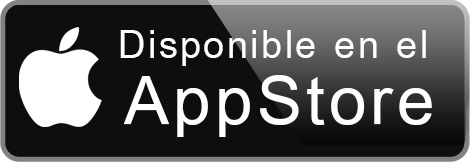
<style>
.page{position:relative;width:470px;height:162px;background:#0e0e0e}
.page>*{position:absolute;margin:0}
.t1{font:58px "CordiaNew-Bold";letter-spacing:0.04em;color:#fffefe}
.t2{font:103px "CordiaNew-Bold";letter-spacing:0.04em;color:#fffefe}
</style>
<div class="page">
<p class="t1" style="left:120px;top:30px;width:306px;height:36px">Disponible en el</p>
<p class="t2" style="left:123px;top:75px;width:309px;height:62px">AppStore</p>
</div>
